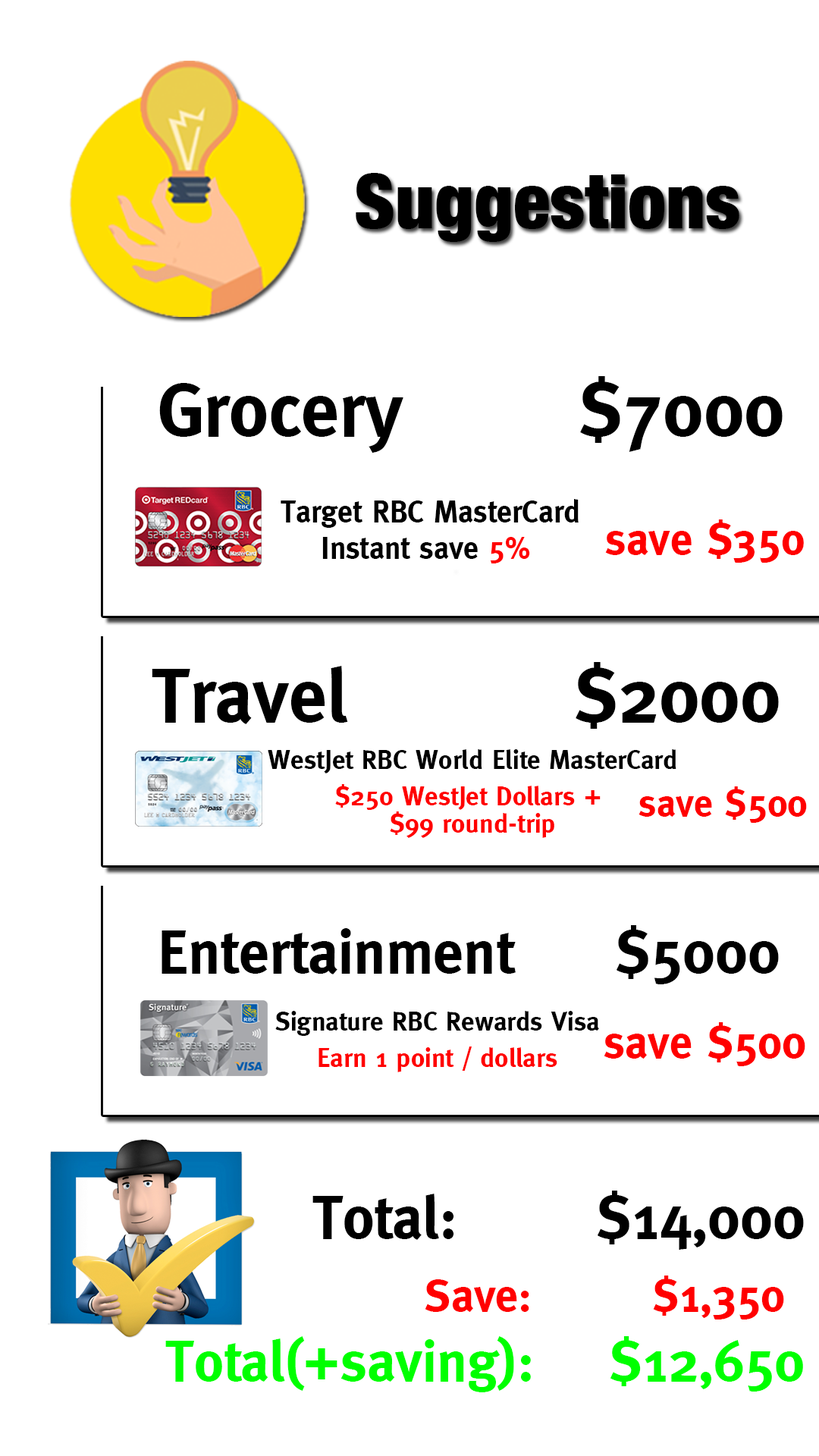
<style>
.page{position:relative;width:819px;height:1456px;background:#ffffff}
.page>*{position:absolute;margin:0}
.t1{font:75.8px "HelveticaNeue-CondensedBlack";color:#000000}
.t2{font:75.8px "MetaBold";color:#000000}
.t3{font:30.3px/18.2px "MetaBold";color:#000000}
.t4{font:30.3px/18.2px "MetaBold";color:#ff0000}
.t5{font:44.7px "MetaBold";color:#ff0000}
.t6{font:26.5px/13.6px "MetaBold";color:#ff0000}
.t7{font:26.5px/18.2px "MetaBold";color:#000000}
.t8{font:37.9px "MetaBold";color:#ff0000}
.t9{font:60.7px "MetaBold";color:#000000}
.t10{font:26.5px/18.2px "MetaBold";color:#ff0000}
.t11{font:45.5px "MetaBold";color:#ff0000}
.t12{font:56.9px/18.2px "MetaBold";color:#00ff00}
.t13{font:60.7px/18.2px "MetaBold";color:#000000}
.t14{font:45.5px/18.2px "MetaBold";color:#ff0000}
</style>
<div class="page">
<p class="t1" style="left:356px;top:173px;width:383px;height:69px">Suggestions</p>
<p class="t2" style="left:159px;top:376px;width:624px;height:77px">Grocery       $7000</p>
<p class="t3" style="left:281px;top:499px;width:298px;height:64px;text-align:center">Target RBC MasterCard<br><br>Instant save <span class="t4">5%</span></p>
<p class="t5" style="left:605px;top:519px;width:199px;height:44px">save $350</p>
<p class="t2" style="left:152px;top:662px;width:627px;height:67px">Travel         $2000</p>
<p class="t6" style="left:268px;top:749px;width:408px;height:89px;text-align:center"><span class="t7">WestJet RBC World Elite MasterCard<br><br></span>$250 WestJet Dollars + <br><br>$99 round-trip</p>
<p class="t8" style="left:639px;top:786px;width:168px;height:37px">save $500</p>
<p class="t9" style="left:162px;top:925px;width:617px;height:59px">Entertainment     $5000</p>
<p class="t7" style="left:275px;top:1011px;width:324px;height:61px;text-align:center">Signature RBC Rewards Visa<br><br><span class="t10">Earn 1 point / dollars</span></p>
<p class="t11" style="left:604px;top:1022px;width:201px;height:44px">save $500</p>
<p class="t12" style="left:165px;top:1191px;width:639px;height:201px;text-align:right"><span class="t13">Total:       $14,000<br><br><br><br></span><span class="t14">Save:        $1,350 <br><br><br><br></span>Total(+saving):    $12,650</p>
</div>
